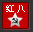
<style>
.page{position:relative;width:33px;height:32px;background:#c50000}
.page>*{position:absolute;margin:0}
.t1{font:10.4px "SimSun";color:#ffffff}
</style>
<div class="page">
<p class="t1" style="left:6px;top:5px;width:19px;height:8px">红八</p>
</div>
